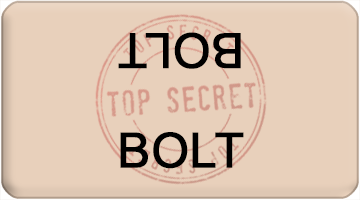
<style>
.page{position:relative;width:360px;height:200px;background:#e8d0bb}
.page>*{position:absolute;margin:0}
.t1{font:48px "ArialMT";color:#000000;font-weight:bold}
</style>
<div class="page">
<p class="t1" style="left:118px;top:32px;width:123px;height:37px;rotate:180deg">BOLT</p>
<p class="t1" style="left:120px;top:132px;width:124px;height:37px">BOLT</p>
</div>
